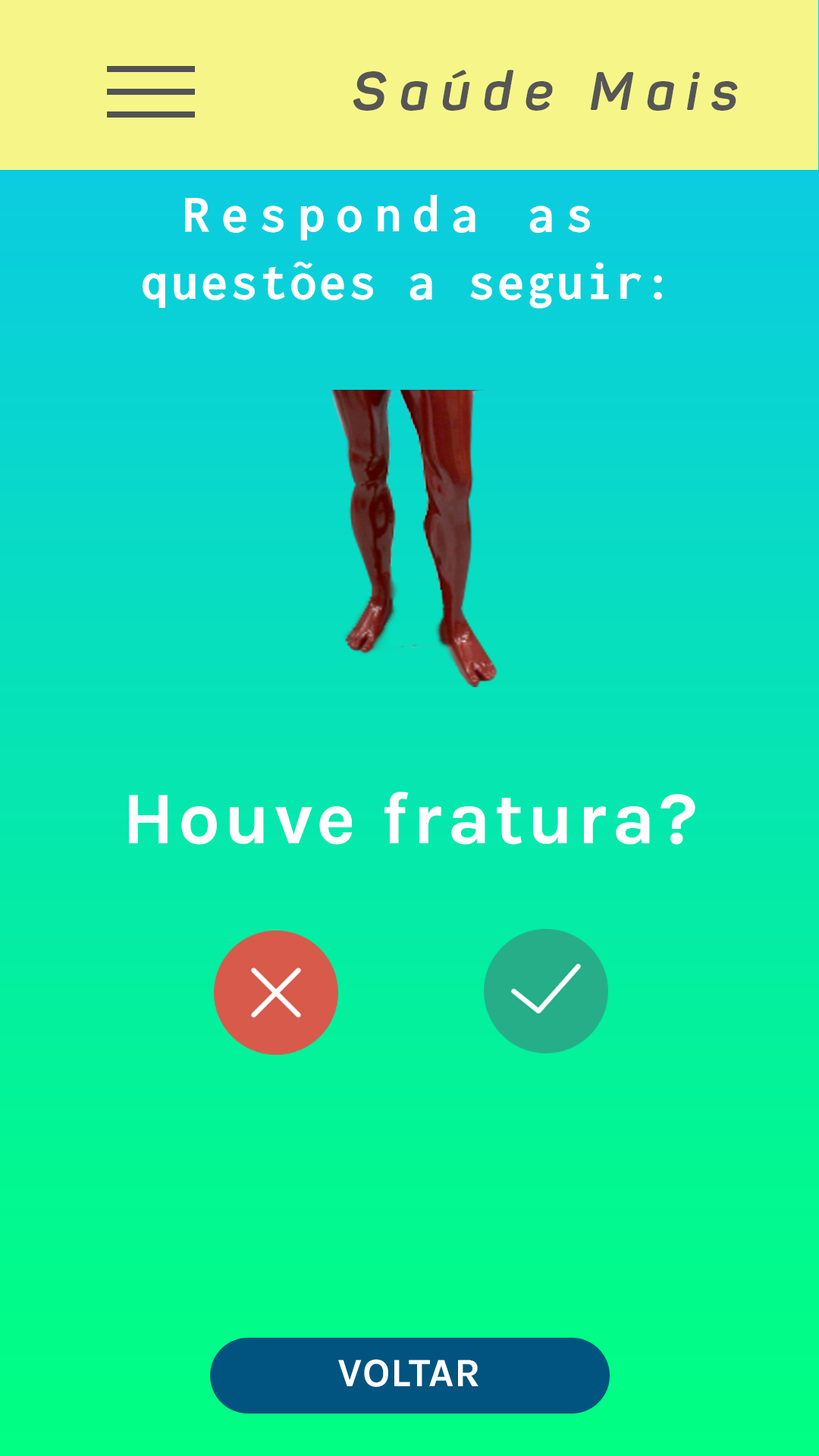
<style>
.page{position:relative;width:819px;height:1456px}
.page>*{position:absolute;margin:0}
.t1{font:53.9px "Panton-BoldItalic";letter-spacing:0.23em;color:#565656}
.t2{font:53.9px/67.4px "Inconsolata-Bold";letter-spacing:0.05em;color:#fefefe}
.t3{font:53.9px/67.4px "Inconsolata-Bold";letter-spacing:0.21em;color:#fefefe}
.t4{font:74.1px "Karla-Bold";letter-spacing:0.05em;color:#fefefe}
.t5{font:40.4px "Karla-Bold";letter-spacing:0.01em;color:#fefefe}
</style>
<div class="page">
<p class="t1" style="left:353px;top:70px;width:385px;height:41px">Saúde Mais</p>
<p class="t2" style="left:143px;top:195px;width:519px;height:114px;text-align:center"><span class="t3">Responda as</span> <br>questões a seguir:</p>
<p class="t4" style="left:129px;top:792px;width:566px;height:53px">Houve fratura?</p>
<p class="t5" style="left:338px;top:1359px;width:141px;height:28px">VOLTAR</p>
</div>
